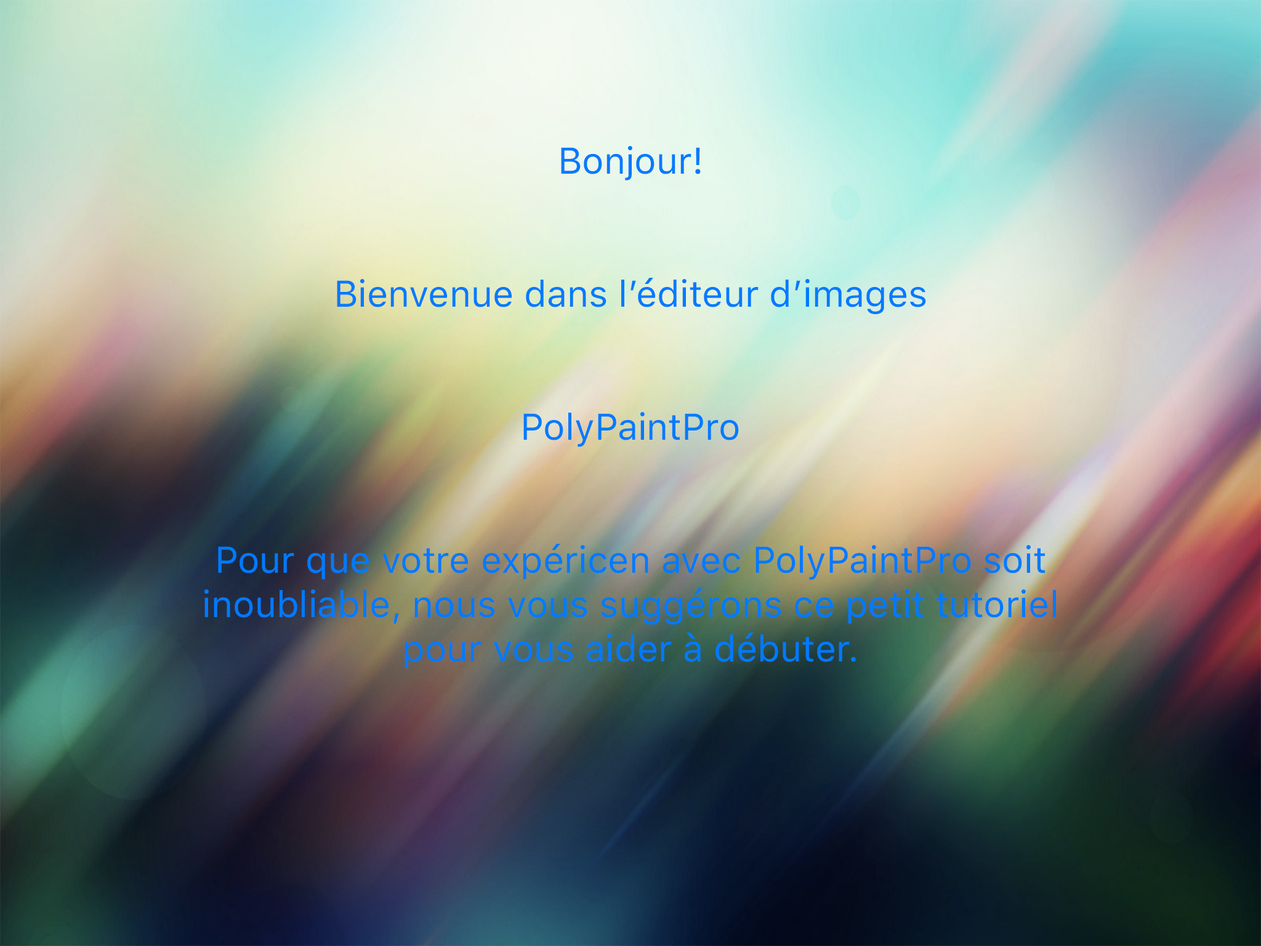
<style>
.page{position:relative;width:1261px;height:946px}
.page>*{position:absolute;margin:0}
.t1{font:36.9px "SFProText-Regular";color:#007aff}
</style>
<div class="page">
<p class="t1" style="left:204px;top:146px;width:852px;height:522px;text-align:center">Bonjour!<br><br><br>Bienvenue dans l’éditeur d’images<br> <br><br>PolyPaintPro<br><br><br>Pour que votre expéricen avec PolyPaintPro soit<br>inoubliable, nous vous suggérons ce petit tutoriel<br>pour vous aider à débuter.</p>
</div>
